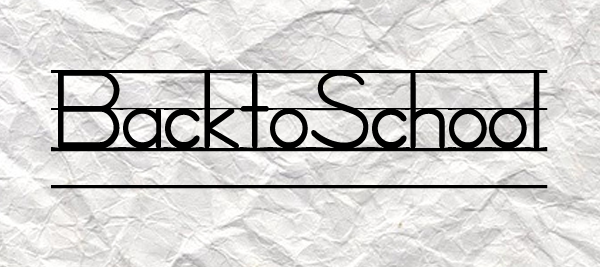
<style>
.page{position:relative;width:600px;height:267px}
.page>*{position:absolute;margin:0}
.t1{font:120px "SchoolHousePrintedA";color:#000000}
</style>
<div class="page">
<p class="t1" style="left:51px;top:70px;width:497px;height:119px">BacktoSchool</p>
</div>
